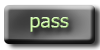
<style>
.page{position:relative;width:100px;height:50px}
.page>*{position:absolute;margin:0}
.t1{font:20px "Tahoma"}
</style>
<div class="page">
<p class="t1" style="left:30px;top:17px;width:39px;height:15px">pass</p>
</div>
